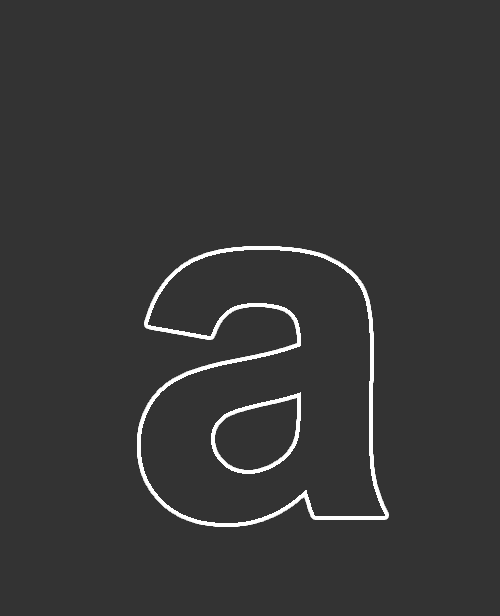
<style>
.page{position:relative;width:500px;height:616px;background:#333333}
.page>*{position:absolute;margin:0}
.t1{font:500px "Arial-BoldMT";color:#333333}
</style>
<div class="page">
<p class="t1" style="left:141px;top:250px;width:244px;height:273px">a</p>
</div>
